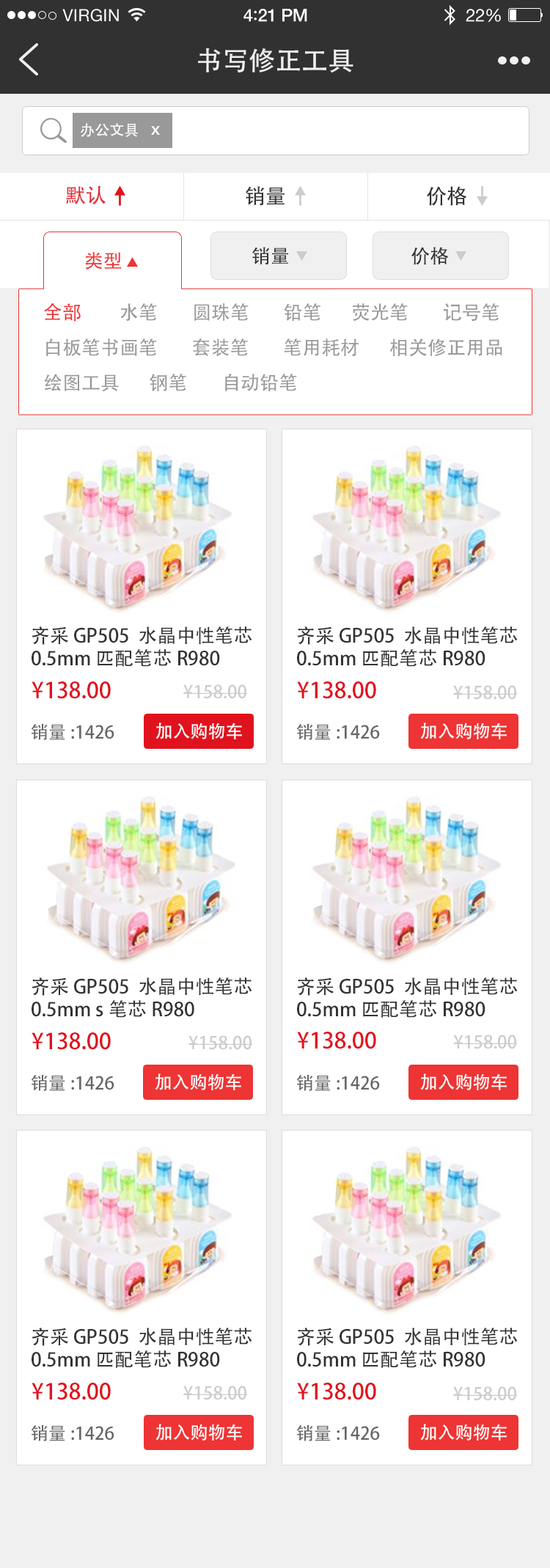
<style>
.page{position:relative;width:550px;height:1568px;background:#ffffff}
.page>*{position:absolute;margin:0}
.t1{font:26.4px "AdobeHeitiStd-Regular";color:#f0f0f0}
.t2{font:14.7px "AdobeHeitiStd-Regular";color:#ffffff}
.t3{font:20.5px "AdobeHeitiStd-Regular";color:#e32d37}
.t4{font:20.5px "AdobeHeitiStd-Regular";color:#333333}
.t5{font:19.1px "AdobeHeitiStd-Regular";color:#ee3434}
.t6{font:19.1px "AdobeHeitiStd-Regular";color:#333333}
.t7{font:19.1px/35.2px "AdobeHeitiStd-Regular";color:#999999}
.t8{font:19.1px/35.2px "AdobeHeitiStd-Regular";color:#ee3434}
.t9{font:19.1px/65.9px "AdobeHeitiStd-Regular";color:#999999}
.t10{font:19px/22.7px "AdobeHeitiStd-Regular";color:#333333}
.t11{font:22px "AdobeHeitiStd-Regular";color:#e0121d}
.t12{font:19.5px "AdobeHeitiStd-Regular";color:#e0121d;font-weight:bold}
.t13{font:17.6px "AdobeHeitiStd-Regular";color:#cccccc}
.t14{font:19.5px "AdobeHeitiStd-Regular";color:#cccccc;font-weight:bold}
.t15{font:17.6px "AdobeHeitiStd-Regular";color:#666666}
.t16{font:17.6px "AdobeHeitiStd-Regular";color:#ffffff}
.t17{font:19.5px "AdobeHeitiStd-Regular";color:#cccccc}
</style>
<div class="page">
<p class="t1" style="left:198px;top:48px;width:155px;height:25px">书写修正工具</p>
<p class="t2" style="left:80px;top:123px;width:58px;height:14px">办公文具</p>
<p class="t3" style="left:66px;top:185px;width:40px;height:19px">默认</p>
<p class="t4" style="left:245px;top:186px;width:39px;height:20px">销量</p>
<p class="t4" style="left:426px;top:186px;width:40px;height:20px">价格</p>
<p class="t5" style="left:85px;top:252px;width:37px;height:18px">类型</p>
<p class="t6" style="left:252px;top:247px;width:36px;height:18px">销量</p>
<p class="t6" style="left:411px;top:247px;width:37px;height:18px">价格</p>
<p class="t7" style="left:44px;top:303px;width:458px;height:89px"><span class="t8">全部         </span>水笔        圆珠笔        铅笔       荧光笔        记号笔        <br>白板笔书画笔        套装笔        笔用耗材       相关修正用品       <br>绘图工具       钢笔        <span class="t9">自动铅笔</span></p>
<p class="t10" style="left:32px;top:626px;width:220px;height:41px">齐采 GP505  水晶中性笔芯<br>0.5mm 匹配笔芯R980</p>
<p class="t10" style="left:297px;top:626px;width:220px;height:41px">齐采 GP505  水晶中性笔芯<br>0.5mm 匹配笔芯R980</p>
<p class="t11" style="left:32px;top:681px;width:79px;height:18px"><span class="t12"> </span>¥138.00</p>
<p class="t13" style="left:183px;top:684px;width:64px;height:15px"><span class="t14"> </span>¥158.00</p>
<p class="t11" style="left:297px;top:681px;width:79px;height:18px"><span class="t12"> </span>¥138.00</p>
<p class="t13" style="left:453px;top:685px;width:64px;height:15px"><span class="t14"> </span>¥158.00</p>
<p class="t15" style="left:31px;top:723px;width:83px;height:17px">销量:1426</p>
<p class="t16" style="left:155px;top:722px;width:87px;height:17px">加入购物车</p>
<p class="t15" style="left:296px;top:723px;width:84px;height:17px">销量:1426</p>
<p class="t16" style="left:420px;top:722px;width:86px;height:17px">加入购物车</p>
<p class="t10" style="left:32px;top:977px;width:220px;height:41px">齐采 GP505  水晶中性笔芯<br>0.5mm s笔芯R980</p>
<p class="t10" style="left:297px;top:977px;width:220px;height:41px">齐采 GP505  水晶中性笔芯<br>0.5mm 匹配笔芯R980</p>
<p class="t11" style="left:32px;top:1032px;width:79px;height:18px"><span class="t12"> </span>¥138.00</p>
<p class="t13" style="left:188px;top:1035px;width:64px;height:15px"><span class="t14"> </span>¥158.00</p>
<p class="t11" style="left:297px;top:1032px;width:79px;height:17px">¥138.00</p>
<p class="t13" style="left:453px;top:1035px;width:64px;height:14px"><span class="t17"> </span>¥158.00</p>
<p class="t16" style="left:155px;top:1073px;width:86px;height:17px">加入购物车</p>
<p class="t16" style="left:420px;top:1073px;width:86px;height:17px">加入购物车</p>
<p class="t15" style="left:31px;top:1074px;width:83px;height:17px">销量:1426</p>
<p class="t15" style="left:296px;top:1074px;width:84px;height:17px">销量:1426</p>
<p class="t10" style="left:32px;top:1328px;width:220px;height:40px">齐采 GP505  水晶中性笔芯<br>0.5mm 匹配笔芯R980</p>
<p class="t10" style="left:297px;top:1328px;width:220px;height:40px">齐采 GP505  水晶中性笔芯<br>0.5mm 匹配笔芯R980</p>
<p class="t11" style="left:32px;top:1383px;width:79px;height:17px"><span class="t12"> </span>¥138.00</p>
<p class="t13" style="left:183px;top:1386px;width:64px;height:14px"><span class="t14"> </span>¥158.00</p>
<p class="t11" style="left:297px;top:1383px;width:79px;height:17px"><span class="t12"> </span>¥138.00</p>
<p class="t13" style="left:453px;top:1386px;width:64px;height:15px"><span class="t14"> </span>¥158.00</p>
<p class="t15" style="left:31px;top:1424px;width:83px;height:17px">销量:1426</p>
<p class="t16" style="left:155px;top:1424px;width:87px;height:17px">加入购物车</p>
<p class="t15" style="left:296px;top:1424px;width:84px;height:17px">销量:1426</p>
<p class="t16" style="left:420px;top:1424px;width:86px;height:17px">加入购物车</p>
</div>
